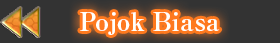
<style>
.page{position:relative;width:280px;height:43px;background:#333333}
.page>*{position:absolute;margin:0}
.t1{font:25px "RyuminPro-ExBold";color:#fffffa}
</style>
<div class="page">
<p class="t1" style="left:80px;top:12px;width:140px;height:23px">Pojok Biasa</p>
</div>
